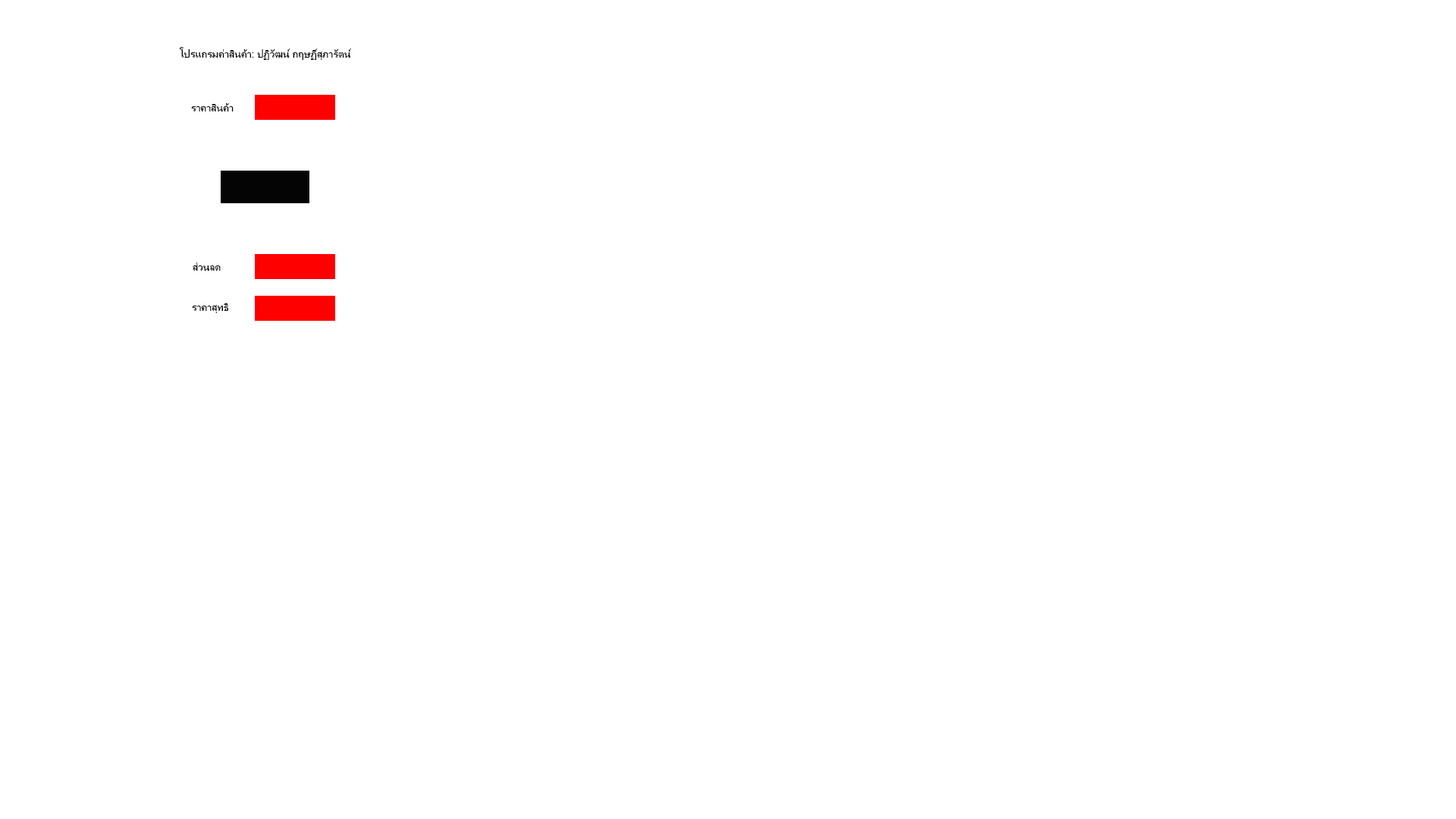
<style>
.page{position:relative;width:1456px;height:819px;background:#ffffff}
.page>*{position:absolute;margin:0}
.t1{font:10.6px "MicrosoftSansSerif";color:#000000}
</style>
<div class="page">
<p class="t1" style="left:179px;top:47px;width:172px;height:13px">โปรแกรมค่าสินค้า: ปฏิวัฒน์ กฤษฏิ์สุภารัตน์</p>
<p class="t1" style="left:191px;top:103px;width:43px;height:8px">ราคาสินค้า</p>
<p class="t1" style="left:193px;top:262px;width:28px;height:9px">ส่วนลด</p>
<p class="t1" style="left:192px;top:303px;width:37px;height:10px">ราคาสุทธิ</p>
</div>
